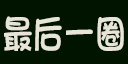
<style>
.page{position:relative;width:128px;height:64px;background:#001400}
.page>*{position:absolute;margin:0}
.t1{font:38.7px "DFPFangYuanW7";color:#e8e4d8;scale:0.8 1}
</style>
<div class="page">
<p class="t1" style="left:4px;top:16px;width:120px;height:35px">最后一圈</p>
</div>
